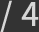
<style>
.page{position:relative;width:39px;height:32px;background:#333333}
.page>*{position:absolute;margin:0}
.t1{font:32px "NotoSansCJKkr-Medium";letter-spacing:0.02em;color:#d7d7d7}
</style>
<div class="page">
<p class="t1" style="left:0px;top:0px;width:39px;height:32px">/ 4</p>
</div>
